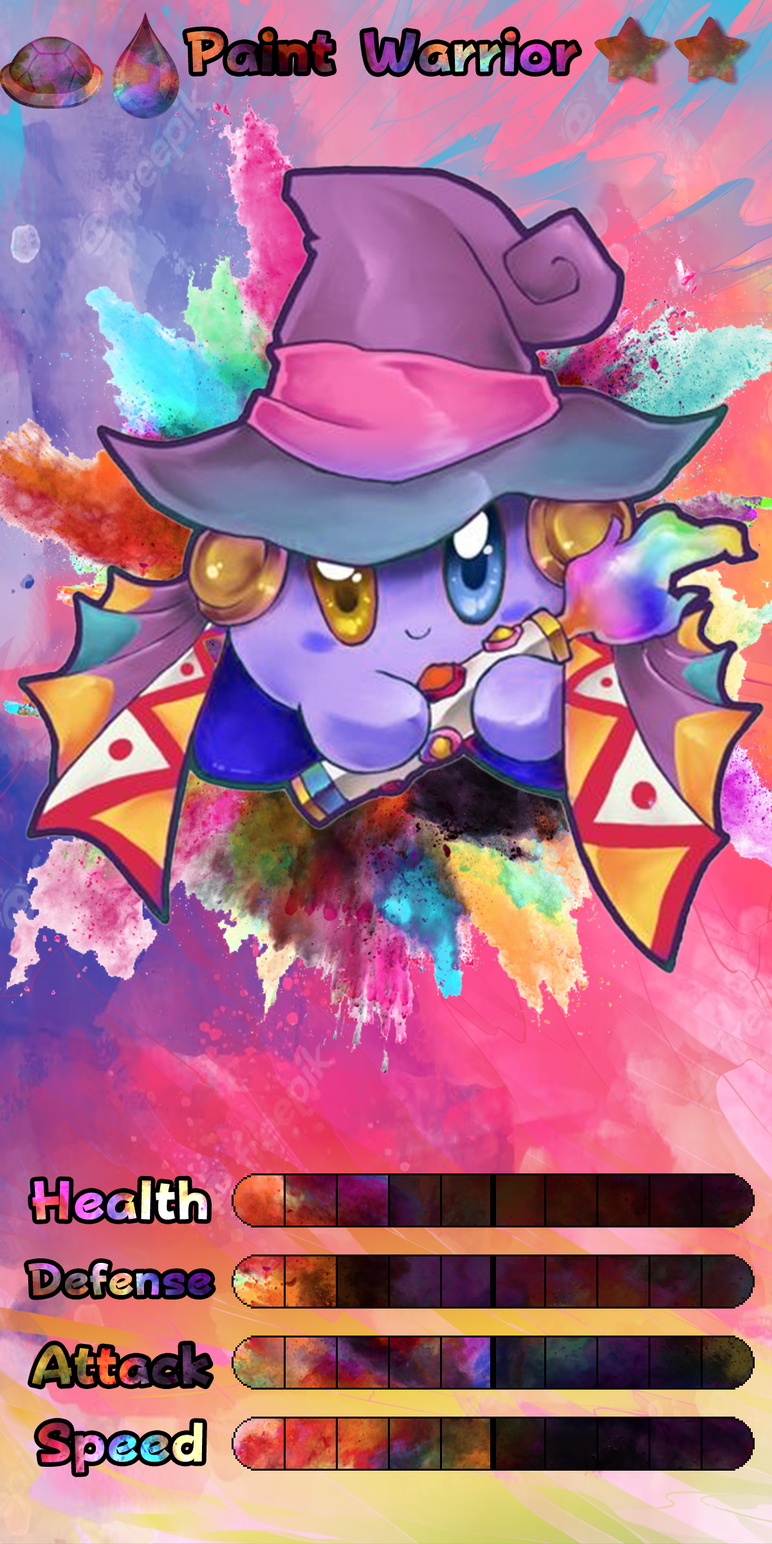
<style>
.page{position:relative;width:772px;height:1544px}
.page>*{position:absolute;margin:0}
.t1{font:92.7px "FOTPopHappinessStrp-ExtraBold"}
.t2{font:75.9px "FOTPopHappinessStrp-ExtraBold"}
</style>
<div class="page">
<p class="t1" style="left:32px;top:1180px;width:175px;height:40px">Health</p>
<p class="t2" style="left:28px;top:1263px;width:184px;height:33px">Defense</p>
<p class="t1" style="left:32px;top:1345px;width:178px;height:40px">Attack</p>
<p class="t1" style="left:38px;top:1423px;width:165px;height:50px">Speed</p>
</div>
